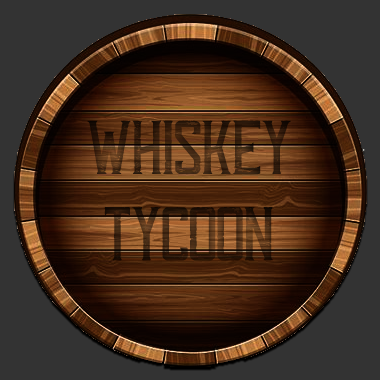
<style>
.page{position:relative;width:380px;height:380px;background:#333333}
.page>*{position:absolute;margin:0}
.t1{font:72px "TennesseeWhiskeyAged"}
</style>
<div class="page">
<p class="t1" style="left:87px;top:120px;width:204px;height:141px;text-align:center">WHISKEY<br>TYCOON</p>
</div>
